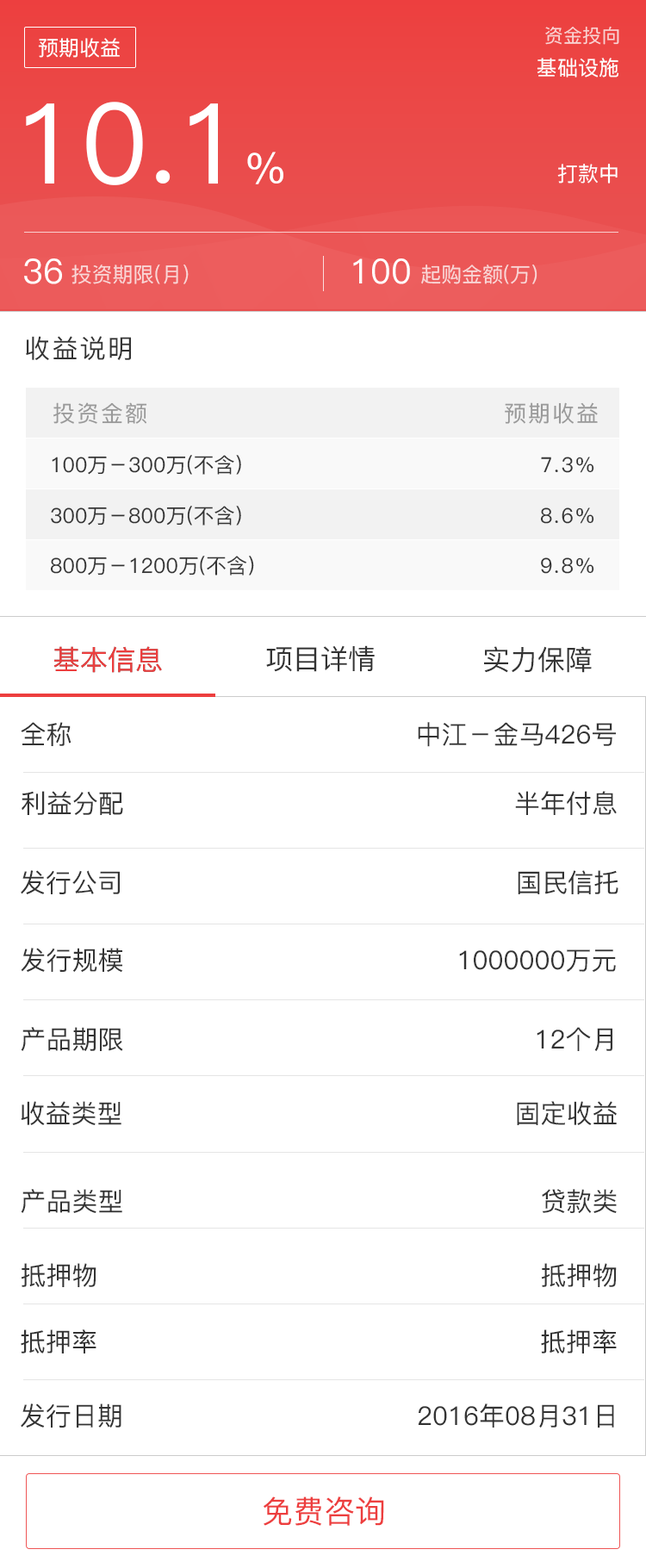
<style>
.page{position:relative;width:646px;height:1568px;background:#ffffff}
.page>*{position:absolute;margin:0}
.t1{font:19px "PingFang-SC-Medium";color:#f9d3d3}
.t2{font:20.7px "PingFang-SC-Medium";color:#ffffff}
.t3{font:20.6px "PingFang-SC-Medium";color:#ffffff}
.t4{font:112px "PingFang-SC-Medium";color:#ffffff}
.t5{font:43.1px "PingFang-SC-Medium";color:#ffffff}
.t6{font:34.3px "PingFang-SC-Medium";color:#ffffff}
.t7{font:20.7px "PingFang-SC-Medium";color:#f9d7d7}
.t8{font:25.8px "PingFang-SC-Medium";letter-spacing:0.075em;color:#333333}
.t9{font:22.4px "PingFang-SC-Medium";letter-spacing:0.075em;color:#999999}
.t10{font:20.7px "PingFang-SC-Medium";color:#333333}
.t11{font:20.7px "PingFang-SC-Medium";letter-spacing:0.075em;color:#333333}
.t12{font:27.6px "PingFang-SC-Medium";color:#ed3e3e}
.t13{font:27.6px "PingFang-SC-Medium";color:#333333}
.t14{font:25.8px "PingFang-SC-Medium";color:#333333}
.t15{font:31px "PingFang-SC-Medium";color:#ed3e3e}
</style>
<div class="page">
<p class="t1" style="left:545px;top:26px;width:74px;height:19px">资金投向</p>
<p class="t2" style="left:38px;top:38px;width:82px;height:20px">预期收益</p>
<p class="t3" style="left:537px;top:58px;width:82px;height:20px">基础设施</p>
<p class="t4" style="left:26px;top:102px;width:257px;height:83px">10.1<span class="t5">%</span></p>
<p class="t2" style="left:557px;top:164px;width:61px;height:20px">打款中</p>
<p class="t6" style="left:24px;top:258px;width:38px;height:26px">36</p>
<p class="t7" style="left:72px;top:264px;width:117px;height:20px">投资期限(月）</p>
<p class="t6" style="left:353px;top:258px;width:57px;height:26px">100</p>
<p class="t7" style="left:421px;top:264px;width:117px;height:20px">起购金额(万）</p>
<p class="t8" style="left:26px;top:336px;width:105px;height:24px">收益说明</p>
<p class="t9" style="left:53px;top:402px;width:94px;height:22px">投资金额</p>
<p class="t9" style="left:505px;top:402px;width:93px;height:22px">预期收益</p>
<p class="t10" style="left:52px;top:455px;width:189px;height:20px">100万－300万(不含）</p>
<p class="t11" style="left:541px;top:457px;width:53px;height:16px">7.3%</p>
<p class="t10" style="left:51px;top:506px;width:190px;height:20px">300万－800万(不含）</p>
<p class="t11" style="left:540px;top:507px;width:54px;height:17px">8.6%</p>
<p class="t10" style="left:50px;top:556px;width:204px;height:20px">800万－1200万(不含）</p>
<p class="t11" style="left:541px;top:557px;width:53px;height:17px">9.8%</p>
<p class="t12" style="left:53px;top:646px;width:109px;height:27px">基本信息</p>
<p class="t12" style="left:53px;top:646px;width:109px;height:27px">基本信息</p>
<p class="t13" style="left:266px;top:645px;width:109px;height:27px">项目详情</p>
<p class="t13" style="left:484px;top:646px;width:108px;height:27px">实力保障</p>
<p class="t14" style="left:21px;top:722px;width:51px;height:24px">全称</p>
<p class="t14" style="left:418px;top:722px;width:198px;height:25px">中江－金马426号</p>
<p class="t14" style="left:22px;top:791px;width:101px;height:24px">利益分配</p>
<p class="t14" style="left:515px;top:791px;width:102px;height:24px">半年付息</p>
<p class="t14" style="left:21px;top:870px;width:99px;height:24px">发行公司</p>
<p class="t14" style="left:518px;top:870px;width:101px;height:24px">国民信托</p>
<p class="t14" style="left:21px;top:948px;width:102px;height:24px">发行规模</p>
<p class="t14" style="left:459px;top:949px;width:157px;height:23px">1000000万元</p>
<p class="t14" style="left:21px;top:1027px;width:102px;height:24px">产品期限</p>
<p class="t14" style="left:537px;top:1027px;width:76px;height:24px">12个月</p>
<p class="t14" style="left:21px;top:1101px;width:100px;height:24px">收益类型</p>
<p class="t14" style="left:517px;top:1101px;width:100px;height:24px">固定收益</p>
<p class="t14" style="left:21px;top:1189px;width:101px;height:24px">产品类型</p>
<p class="t14" style="left:542px;top:1189px;width:75px;height:24px">贷款类</p>
<p class="t14" style="left:21px;top:1263px;width:75px;height:24px">抵押物</p>
<p class="t14" style="left:541px;top:1263px;width:76px;height:24px">抵押物</p>
<p class="t14" style="left:21px;top:1329px;width:75px;height:24px">抵押率</p>
<p class="t14" style="left:541px;top:1329px;width:76px;height:24px">抵押率</p>
<p class="t14" style="left:21px;top:1403px;width:100px;height:25px">发行日期</p>
<p class="t14" style="left:418px;top:1403px;width:196px;height:25px">2016年08月31日</p>
<p class="t15" style="left:264px;top:1496px;width:120px;height:30px">免费咨询</p>
</div>
